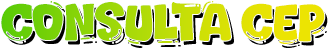
<style>
.page{position:relative;width:328px;height:48px;background:#ffffff}
.page>*{position:absolute;margin:0}
.t1{font:49px "Coffee-Soda";letter-spacing:-0.05em}
</style>
<div class="page">
<p class="t1" style="left:1px;top:1px;width:324px;height:43px">CONSULTA CEP</p>
</div>
